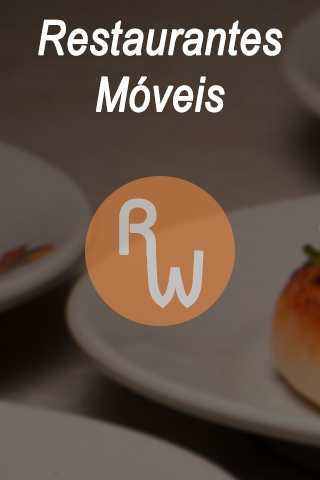
<style>
.page{position:relative;width:320px;height:480px}
.page>*{position:absolute;margin:0}
.t1{font:47.2px "ArialNarrow-Italic";color:#ffffff;font-weight:bold}
.t2{font:76.2px "Baumans-Regular";color:#bab5b1;font-weight:bold}
.t3{font:76.2px "Baumans-Regular";color:#c3bfbc;font-weight:bold}
</style>
<div class="page">
<p class="t1" style="left:38px;top:19px;width:245px;height:94px;text-align:center">Restaurantes<br>Móveis</p>
<p class="t2" style="left:119px;top:198px;width:38px;height:57px">R</p>
<p class="t3" style="left:146px;top:250px;width:58px;height:58px">W</p>
</div>
